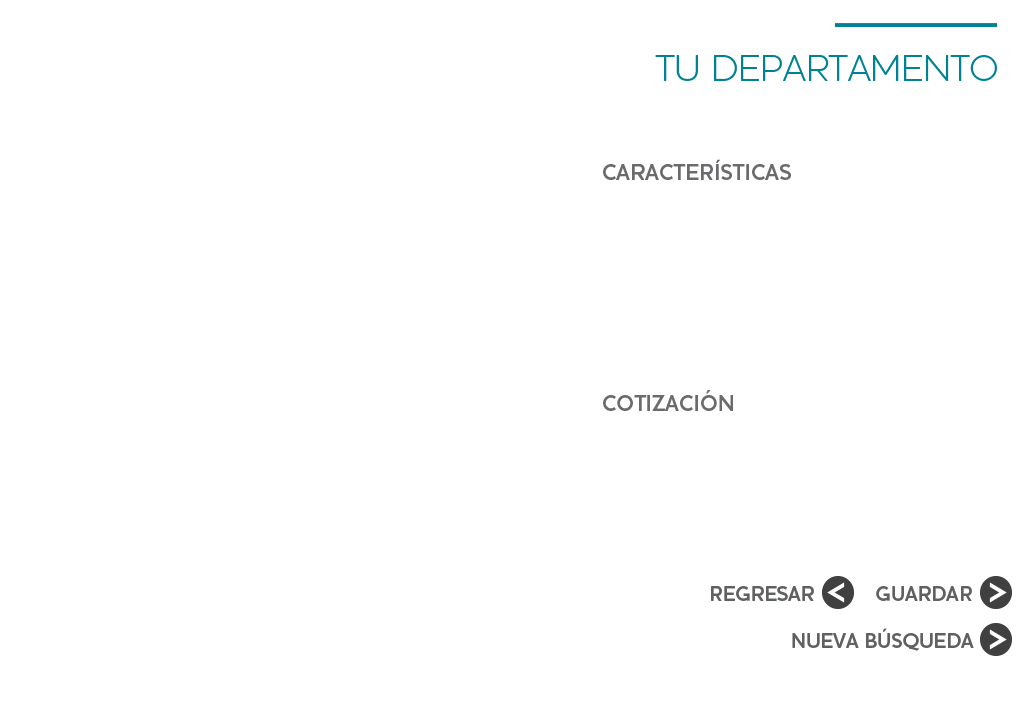
<style>
.page{position:relative;width:1024px;height:705px;background:#ffffff}
.page>*{position:absolute;margin:0}
.t1{font:37.5px "HouschkaAlt-Light";color:#008295}
.t2{font:22.9px "HouschkaAlt-Bold";color:#6a6b6d}
.t3{font:20.8px "HouschkaAlt-Bold";color:#5e6062}
</style>
<div class="page">
<p class="t1" style="left:655px;top:55px;width:342px;height:26px">TU DEPARTAMENTO</p>
<p class="t2" style="left:603px;top:159px;width:188px;height:21px">CARACTERÍSTICAS</p>
<p class="t2" style="left:603px;top:390px;width:130px;height:21px">COTIZACIÓN</p>
<p class="t3" style="left:711px;top:586px;width:103px;height:15px">REGRESAR</p>
<p class="t3" style="left:876px;top:586px;width:96px;height:15px">GUARDAR</p>
<p class="t3" style="left:792px;top:628px;width:182px;height:23px">NUEVA BÚSQUEDA</p>
</div>
